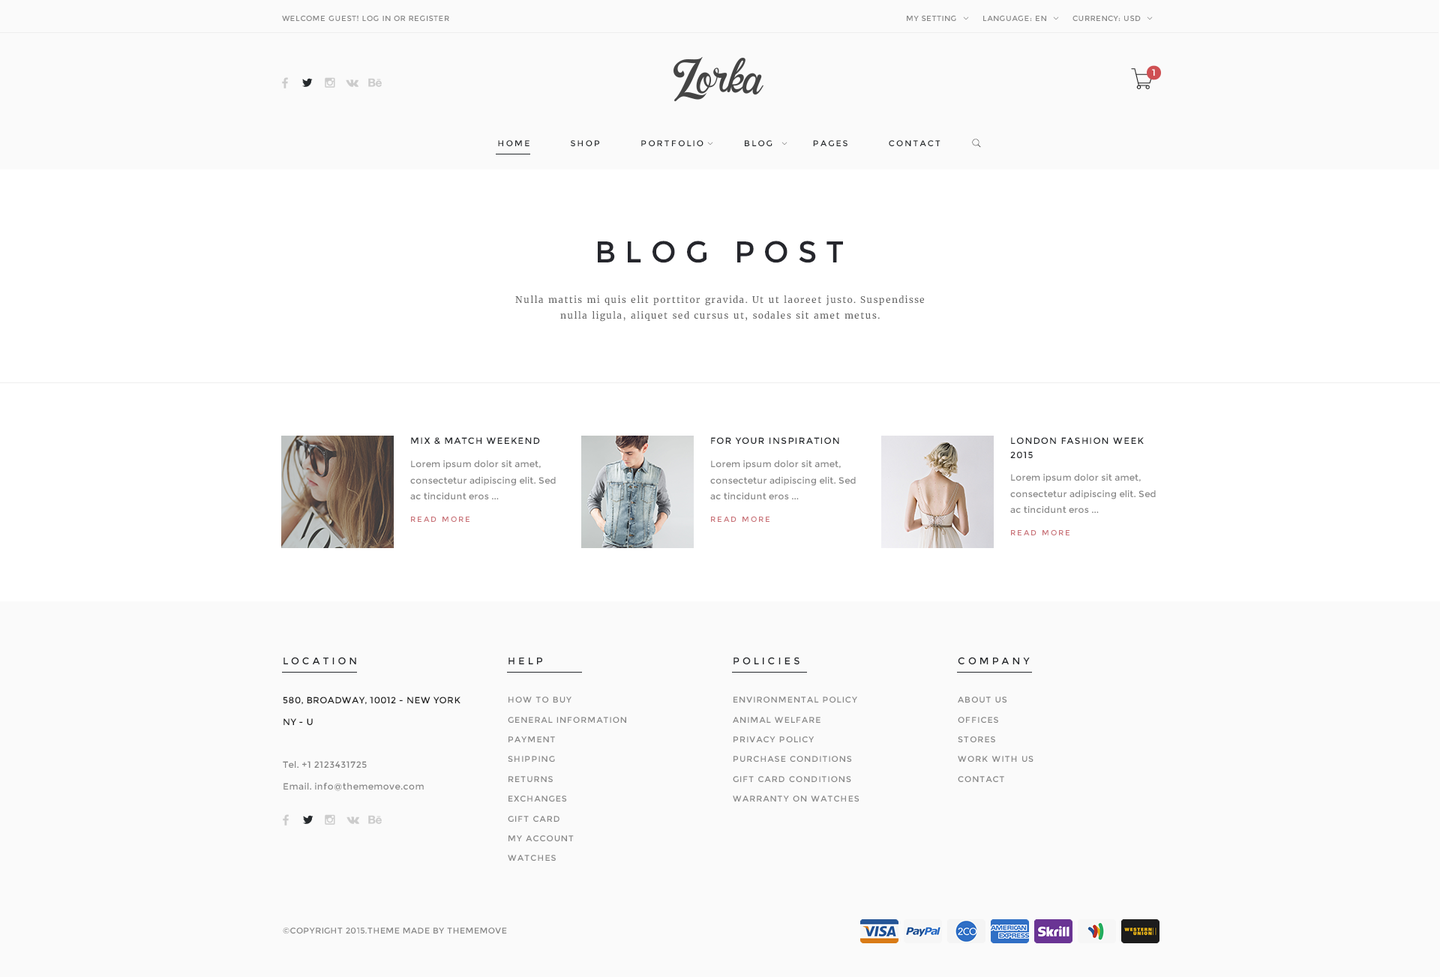
<style>
.page{position:relative;width:1440px;height:977px;background:#fafafa}
.page>*{position:absolute;margin:0}
.t1{font:7.5px "Montserrat-Regular";letter-spacing:0.05em;color:#888888}
.t2{font:9px "Montserrat-Regular";letter-spacing:0.3em;color:#ffffff}
.t3{font:8.2px "Montserrat-Regular";letter-spacing:0.2em;color:#25292c}
.t4{font:30px "Montserrat-Regular";letter-spacing:0.3em;color:#25262c}
.t5{font:9px/16.2px "Merriweather-Regular";letter-spacing:0.1em;color:#666666}
.t6{font:9px "Montserrat-Regular";letter-spacing:0.1em;color:#25282c}
.t7{font:9px/14.4px "Montserrat-Regular";letter-spacing:0.1em;color:#25282c}
.t8{font:9px/16.2px "Montserrat-Regular";letter-spacing:0.02em;color:#878787}
.t9{font:7.5px "Montserrat-Regular";letter-spacing:0.2em;color:#ca7379}
.t10{font:9.8px "Montserrat-Regular";letter-spacing:0.3em;color:#25282c}
.t11{font:9px/21.6px "Montserrat-Regular";letter-spacing:0.04em;color:#868686}
.t12{font:9px/21.6px "Montserrat-Regular";letter-spacing:0.04em;color:#202020}
.t13{font:8.2px/19.8px "Montserrat-Regular";letter-spacing:0.1em;color:#888888}
.t14{font:8.2px/19.8px "Montserrat-Regular";letter-spacing:0.1em;color:#878787}
.t15{font:8.2px "Montserrat-Regular";letter-spacing:0.04em;color:#868686}
</style>
<div class="page">
<p class="t1" style="left:282px;top:15px;width:167px;height:6px">WELCOME GUEST! LOG IN OR REGISTER</p>
<p class="t1" style="left:907px;top:15px;width:49px;height:6px">MY SETTING</p>
<p class="t1" style="left:983px;top:15px;width:63px;height:6px">LANGUAGE: EN</p>
<p class="t1" style="left:1072px;top:15px;width:69px;height:6px">CURRENCY: USD</p>
<p class="t2" style="left:1152px;top:69px;width:3px;height:7px">1</p>
<p class="t3" style="left:498px;top:140px;width:442px;height:6px">HOME          SHOP          PORTFOLIO          BLOG          PAGES          CONTACT</p>
<p class="t4" style="left:598px;top:241px;width:245px;height:22px">BLOG POST</p>
<p class="t5" style="left:515px;top:296px;width:409px;height:26px;text-align:center">Nulla mattis mi quis elit porttitor gravida. Ut ut laoreet justo. Suspendisse nulla ligula, aliquet sed cursus ut, sodales sit amet metus.</p>
<p class="t6" style="left:411px;top:437px;width:129px;height:8px">MIX &amp; MATCH WEEKEND</p>
<p class="t6" style="left:711px;top:437px;width:128px;height:7px">FOR YOUR INSPIRATION</p>
<p class="t7" style="left:1010px;top:437px;width:134px;height:21px">LONDON FASHION WEEK 2015</p>
<p class="t8" style="left:410px;top:460px;width:146px;height:40px">Lorem ipsum dolor sit amet, consectetur adipiscing elit. Sed ac tincidunt eros ...</p>
<p class="t8" style="left:710px;top:460px;width:146px;height:40px">Lorem ipsum dolor sit amet, consectetur adipiscing elit. Sed ac tincidunt eros ...</p>
<p class="t8" style="left:1010px;top:474px;width:146px;height:39px">Lorem ipsum dolor sit amet, consectetur adipiscing elit. Sed ac tincidunt eros ...</p>
<p class="t9" style="left:411px;top:516px;width:59px;height:6px">READ MORE</p>
<p class="t9" style="left:711px;top:516px;width:59px;height:6px">READ MORE</p>
<p class="t9" style="left:1011px;top:530px;width:59px;height:6px">READ MORE</p>
<p class="t10" style="left:284px;top:657px;width:72px;height:7px">LOCATION</p>
<p class="t10" style="left:508px;top:658px;width:34px;height:6px">HELP</p>
<p class="t10" style="left:734px;top:657px;width:66px;height:7px">POLICIES</p>
<p class="t10" style="left:958px;top:657px;width:72px;height:7px">COMPANY</p>
<p class="t11" style="left:283px;top:697px;width:177px;height:94px"><span class="t12">580, BROADWAY, 10012 - NEW YORK <br>NY - U<br><br></span>Tel. +1 2123431725<br>Email. info@thememove.com</p>
<p class="t13" style="left:508px;top:697px;width:118px;height:164px">HOW TO BUY<br>GENERAL INFORMATION<br>PAYMENT<br>SHIPPING<br>RETURNS<br>EXCHANGES<br>GIFT CARD<br>MY ACCOUNT<br>WATCHES</p>
<p class="t13" style="left:733px;top:697px;width:127px;height:105px">ENVIRONMENTAL POLICY<br>ANIMAL WELFARE<br>PRIVACY POLICY<br>PURCHASE CONDITIONS<br>GIFT CARD CONDITIONS<br>WARRANTY ON WATCHES</p>
<p class="t14" style="left:958px;top:697px;width:76px;height:85px">ABOUT US<br>OFFICES<br>STORES<br>WORK WITH US<br>CONTACT</p>
<p class="t15" style="left:283px;top:928px;width:224px;height:6px">©COPYRIGHT 2015.THEME MADE BY THEMEMOVE</p>
</div>
